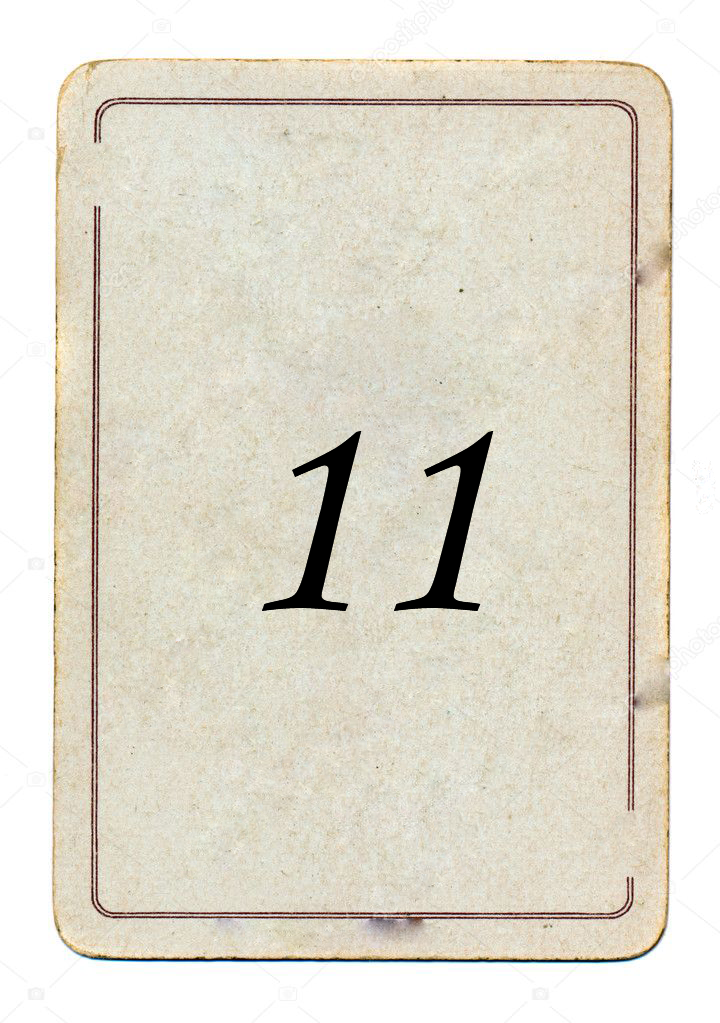
<style>
.page{position:relative;width:720px;height:1023px}
.page>*{position:absolute;margin:0}
.t1{font:300px "MonotypeCorsiva";color:#000000}
.t2{font:150px "MonotypeCorsiva";color:#000000}
</style>
<div class="page">
<p class="t1" style="left:262px;top:431px;width:232px;height:180px"><span class="t2"><br></span>11</p>
</div>
